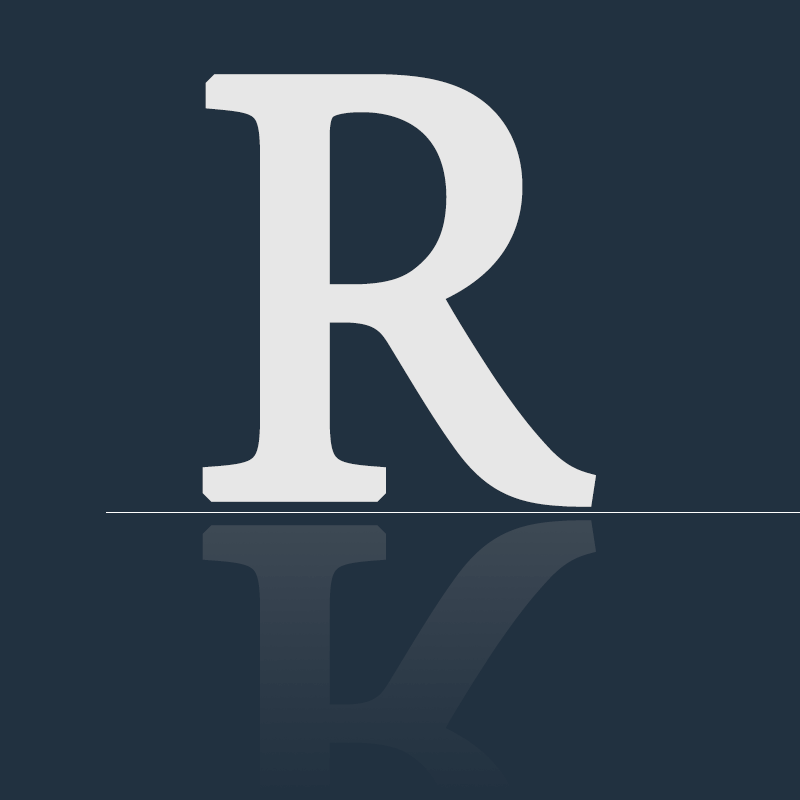
<style>
.page{position:relative;width:800px;height:800px;background:#213140}
.page>*{position:absolute;margin:0}
.t1{font:631px "MinionPro-Regular";color:#e7e7e7;text-transform:uppercase;font-weight:bold}
</style>
<div class="page">
<p class="t1" style="left:202px;top:74px;width:394px;height:433px">r</p>
</div>
